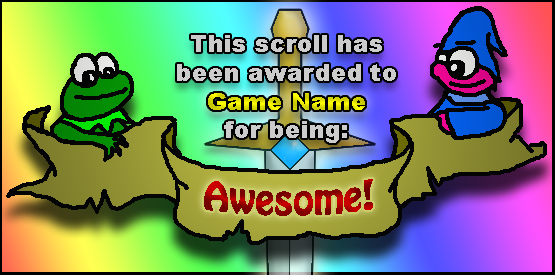
<style>
.page{position:relative;width:555px;height:275px}
.page>*{position:absolute;margin:0}
.t1{font:24px "Arial-Black";color:#cccccc}
.t2{font:24px "Arial-Black";color:#dbdb00}
.t3{font:36px "HoboStd"}
</style>
<div class="page">
<p class="t1" style="left:177px;top:35px;width:219px;height:108px;text-align:center">This scroll has<br>been awarded to<br><br>for being:</p>
<p class="t2" style="left:208px;top:93px;width:157px;height:17px">Game Name</p>
<p class="t3" style="left:204px;top:179px;width:169px;height:37px">Awesome!</p>
</div>
